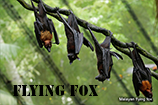
<style>
.page{position:relative;width:158px;height:105px}
.page>*{position:absolute;margin:0}
.t1{font:14px "StencilStd";color:#000000}
</style>
<div class="page">
<p class="t1" style="left:13px;top:85px;width:85px;height:11px">Flying Fox</p>
</div>
